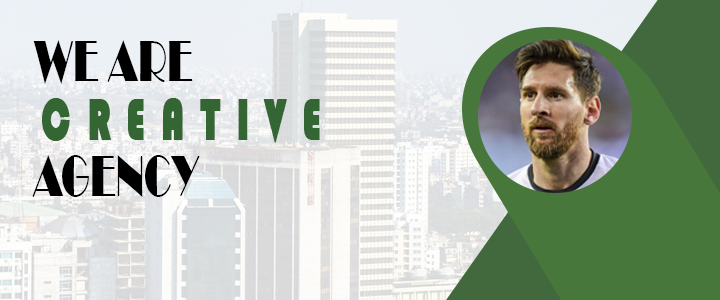
<style>
.page{position:relative;width:720px;height:300px}
.page>*{position:absolute;margin:0}
.t1{font:60px "Broadway";color:#000000;scale:0.64 1}
.t2{font:60px "Bauhaus93";letter-spacing:0.4em;color:#336633;font-weight:bold;scale:0.64 1}
</style>
<div class="page">
<p class="t1" style="left:33px;top:40px;width:160px;height:44px">WE ARE</p>
<p class="t2" style="left:42px;top:98px;width:278px;height:45px">CREATIVE</p>
<p class="t1" style="left:32px;top:155px;width:168px;height:42px">AGENCY</p>
</div>
